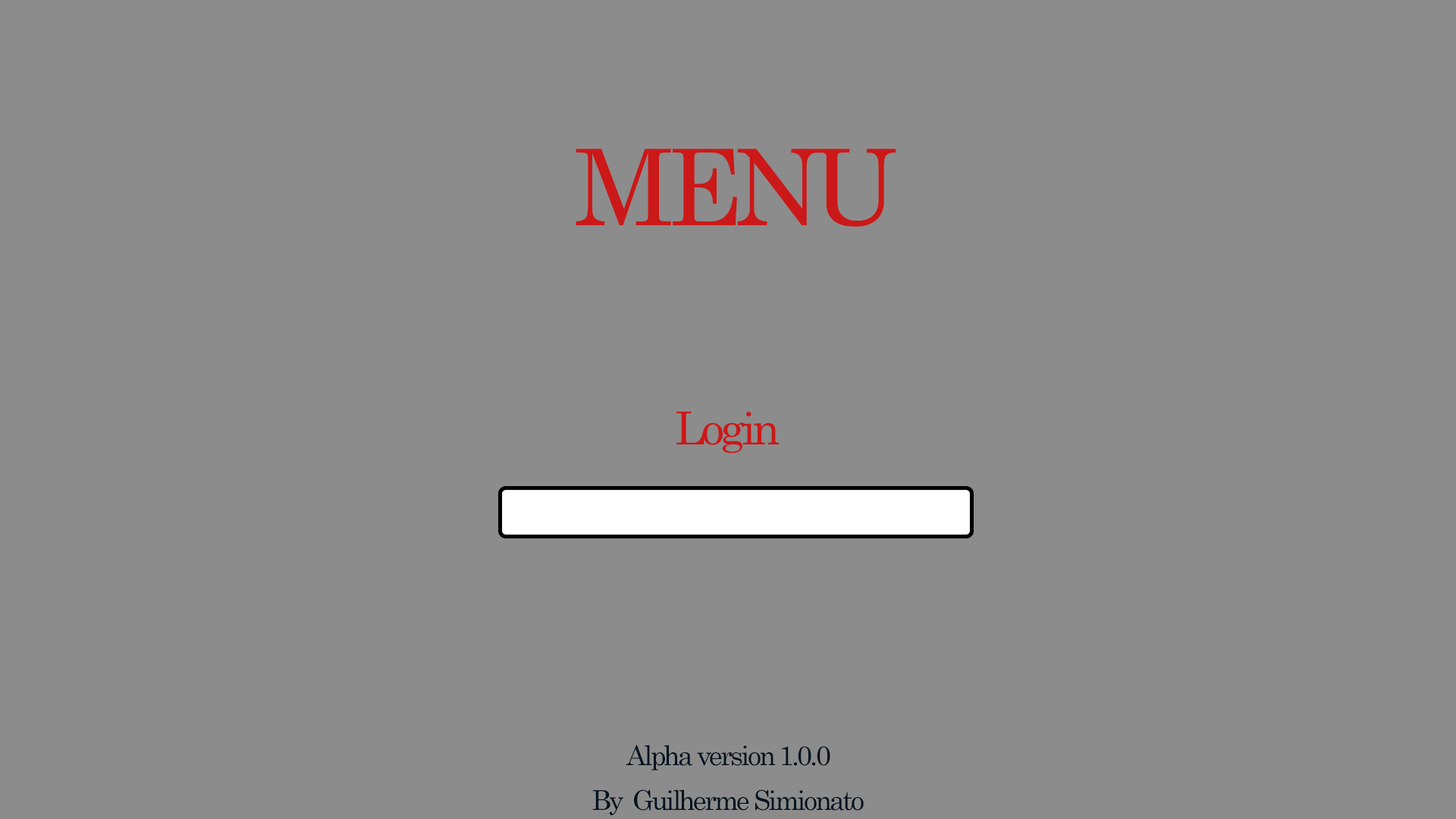
<style>
.page{position:relative;width:1456px;height:819px;background:#8c8c8c}
.page>*{position:absolute;margin:0}
.t1{font:105.9px "Century";letter-spacing:-0.08em;color:#cb1818}
.t2{font:45.5px "Century";letter-spacing:-0.08em;color:#cb1818}
.t3{font:27.3px "Century";letter-spacing:-0.08em;color:#00131f}
</style>
<div class="page">
<p class="t1" style="left:576px;top:149px;width:320px;height:78px">MENU</p>
<p class="t2" style="left:676px;top:411px;width:104px;height:42px">Login</p>
<p class="t3" style="left:626px;top:745px;width:204px;height:25px">Alpha version 1.0.0</p>
<p class="t3" style="left:592px;top:789px;width:272px;height:26px">By  Guilherme Simionato</p>
</div>
